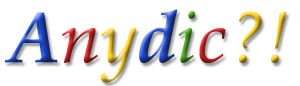
<style>
.page{position:relative;width:300px;height:86px;background:#ffffff}
.page>*{position:absolute;margin:0}
.t1{font:72px "BookAntiqua-Italic"}
.t2{font:6px "BookAntiqua-Italic"}
.t3{font:72px "BookAntiqua-BoldItalic"}
</style>
<div class="page">
<p class="t1" style="left:5px;top:9px;width:282px;height:74px"><span class="t2">     </span><span class="t3">A</span>ny<span class="t3">d</span>ic  ?!</p>
</div>
